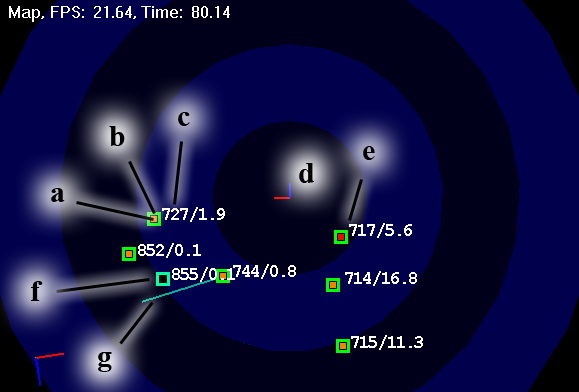
<style>
.page{position:relative;width:579px;height:392px;background:#00004d}
.page>*{position:absolute;margin:0}
.t1{font:30px "TimesNewRomanPS-BoldMT";color:#000000}
.t2{font:18px "CourierNewPS-BoldMT";letter-spacing:-0.1em;color:#ffffff}
</style>
<div class="page">
<p class="t1" style="left:178px;top:112px;width:12px;height:14px">c</p>
<p class="t1" style="left:109px;top:126px;width:16px;height:20px">b</p>
<p class="t1" style="left:363px;top:146px;width:12px;height:14px">e</p>
<p class="t1" style="left:299px;top:163px;width:15px;height:20px">d</p>
<p class="t1" style="left:51px;top:188px;width:14px;height:14px">a</p>
<p class="t2" style="left:162px;top:207px;width:63px;height:15px">727/1.9</p>
<p class="t2" style="left:349px;top:223px;width:63px;height:15px">717/5.6</p>
<p class="t2" style="left:138px;top:243px;width:63px;height:15px">852/0.1</p>
<p class="t2" style="left:172px;top:267px;width:63px;height:15px">855/0.1</p>
<p class="t2" style="left:233px;top:264px;width:63px;height:15px">744/0.8</p>
<p class="t1" style="left:31px;top:281px;width:12px;height:20px">f</p>
<p class="t2" style="left:345px;top:271px;width:72px;height:15px">714/16.8</p>
<p class="t2" style="left:351px;top:335px;width:72px;height:15px">715/11.3</p>
<p class="t1" style="left:98px;top:352px;width:14px;height:20px">g</p>
</div>
